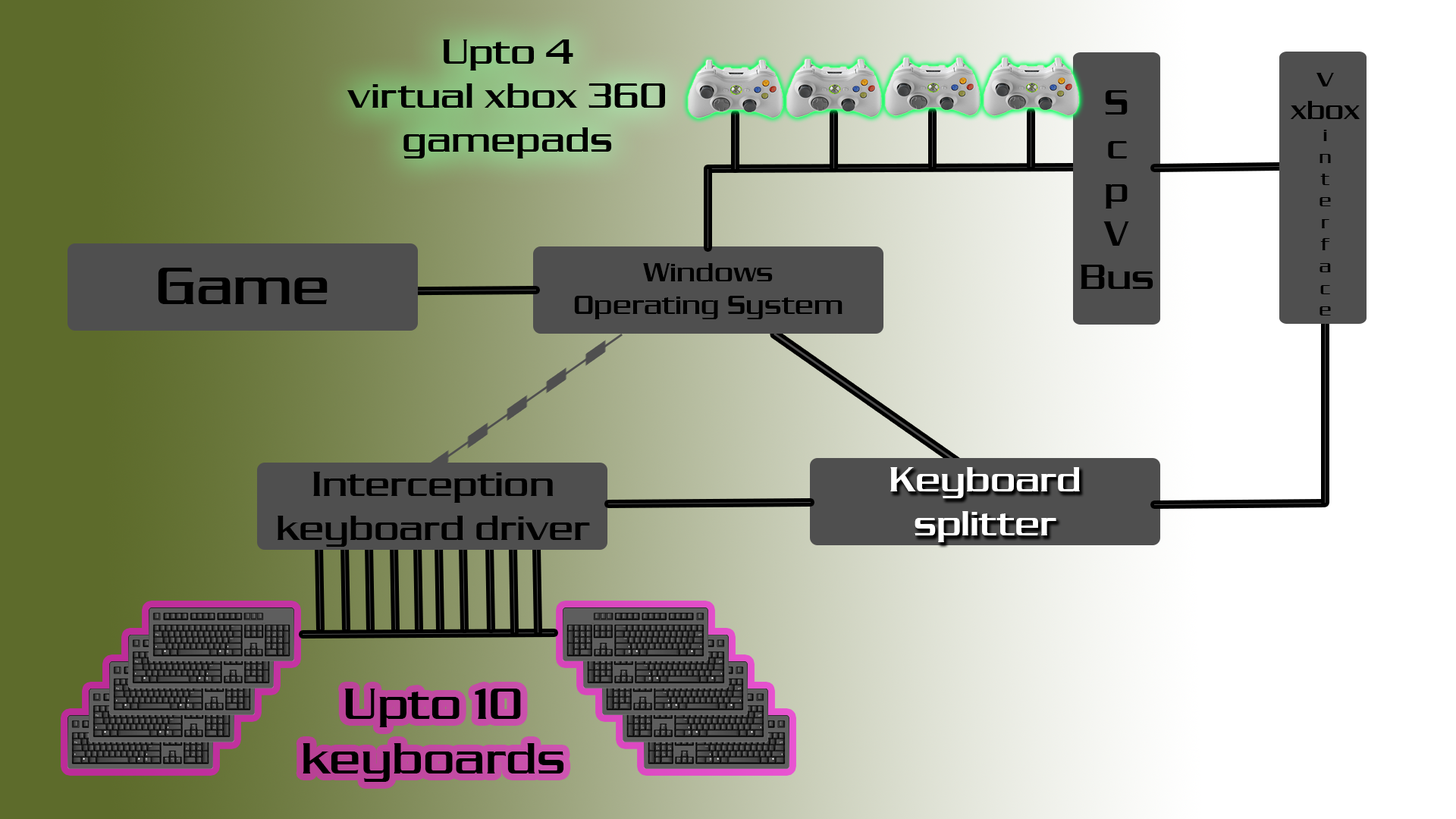
<style>
.page{position:relative;width:1456px;height:819px}
.page>*{position:absolute;margin:0}
.t1{font:36.4px "Dungeon-Regular";color:#000000}
.t2{font:18.2px "Dungeon-Regular";color:#000000}
.t3{font:27.3px "Dungeon-Regular";color:#000000}
.t4{font:54.6px "Dungeon-Regular";color:#000000}
.t5{font:36.4px "Dungeon-Regular";color:#ffffff}
.t6{font:45.5px "Dungeon-Regular";color:#000000}
</style>
<div class="page">
<p class="t1" style="left:347px;top:39px;width:318px;height:119px;text-align:center">Upto 4<br>virtual xbox 360<br>gamepads</p>
<p class="t2" style="left:1290px;top:73px;width:70px;height:242px;text-align:center"><span class="t3">v<br>xbox<br></span>i<br>n<br>t<br>e<br>r<br>f<br>a<br>c<br>e</p>
<p class="t1" style="left:1081px;top:90px;width:72px;height:199px;text-align:center">S<br>c<br>p<br>V<br>Bus</p>
<p class="t4" style="left:158px;top:268px;width:170px;height:36px">Game</p>
<p class="t3" style="left:574px;top:263px;width:268px;height:56px;text-align:center">Windows<br>Operating System</p>
<p class="t1" style="left:278px;top:472px;width:312px;height:75px;text-align:center">Interception<br>keyboard driver</p>
<p class="t5" style="left:890px;top:467px;width:190px;height:75px;text-align:center">Keyboard<br>splitter</p>
<p class="t6" style="left:303px;top:689px;width:261px;height:93px;text-align:center">Upto 10<br>keyboards</p>
</div>
